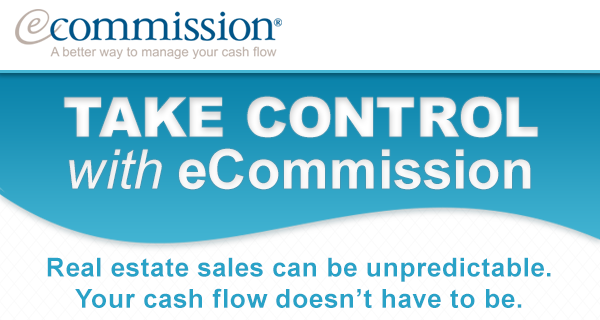
<style>
.page{position:relative;width:600px;height:320px;background:#ffffff}
.page>*{position:absolute;margin:0}
.t1{font:54.5px "Arial-Black";color:#ffffff;text-transform:uppercase}
.t2{font:54.5px "Arial-BoldMT";color:#ffffff}
.t3{font:54.5px "Arial-ItalicMT";color:#ffffff}
.t4{font:26.1px "Arial-BoldMT";letter-spacing:0.025em;color:#29a2c7}
</style>
<div class="page">
<p class="t1" style="left:64px;top:96px;width:474px;height:42px">Take Control</p>
<p class="t2" style="left:69px;top:148px;width:462px;height:42px"><span class="t3">with </span>eCommission</p>
<p class="t4" style="left:47px;top:257px;width:504px;height:51px;text-align:center">Real estate sales can be unpredictable.<br>Your cash flow doesn’t have to be.</p>
</div>
